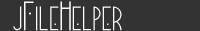
<style>
.page{position:relative;width:200px;height:31px;background:#333333}
.page>*{position:absolute;margin:0}
.t1{font:30px "Blake";color:#ffffff}
</style>
<div class="page">
<p class="t1" style="left:13px;top:1px;width:109px;height:30px">jFileHelper</p>
</div>
